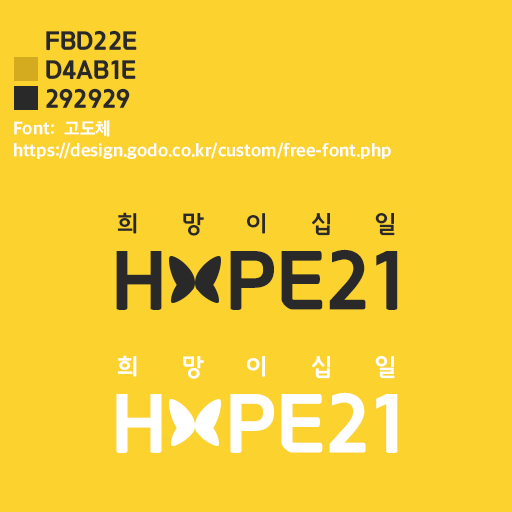
<style>
.page{position:relative;width:512px;height:512px;background:#fbd22e}
.page>*{position:absolute;margin:0}
.t1{font:25px "GodoB";color:#292929}
.t2{font:18.1px "AppleSDGothicNeo-ExtraBold";color:#ffffff}
.t3{font:23.8px "GodoM";letter-spacing:1.8em;color:#292929}
.t4{font:79.3px "GodoB";color:#292929}
.t5{font:23.8px "GodoM";letter-spacing:1.8em;color:#ffffff}
.t6{font:79.3px "GodoB";color:#ffffff}
</style>
<div class="page">
<p class="t1" style="left:46px;top:30px;width:91px;height:21px">FBD22E</p>
<p class="t1" style="left:46px;top:60px;width:90px;height:20px">D4AB1E</p>
<p class="t1" style="left:46px;top:88px;width:84px;height:20px">292929</p>
<p class="t2" style="left:14px;top:120px;width:377px;height:39px">Font:  고도체<br>https://design.godo.co.kr/custom/free-font.php</p>
<p class="t3" style="left:117px;top:212px;width:278px;height:24px">희망이십일</p>
<p class="t4" style="left:116px;top:249px;width:282px;height:62px">HOPE21</p>
<p class="t5" style="left:117px;top:355px;width:278px;height:24px">희망이십일</p>
<p class="t6" style="left:116px;top:392px;width:282px;height:62px">HOPE21</p>
</div>
